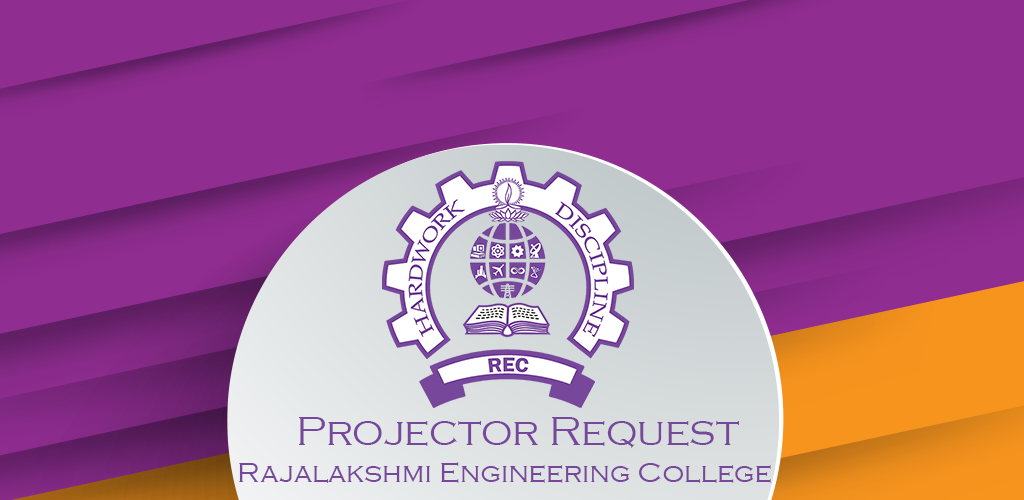
<style>
.page{position:relative;width:1024px;height:500px;background:#902d91}
.page>*{position:absolute;margin:0}
.t1{font:41.7px "CopperplateGothic-Light";color:#77479c}
.t2{font:29.2px "CopperplateGothic-Light";color:#77479c}
</style>
<div class="page">
<p class="t1" style="left:299px;top:417px;width:440px;height:31px">Projector Request</p>
<p class="t2" style="left:239px;top:462px;width:532px;height:21px">Rajalakshmi Engineering College</p>
</div>
